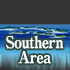
<style>
.page{position:relative;width:70px;height:70px;background:#333333}
.page>*{position:absolute;margin:0}
.t1{font:16px/15px "RyuminPro-ExBold";letter-spacing:-0.04em;color:#ffffff;scale:0.9 1}
</style>
<div class="page">
<p class="t1" style="left:6px;top:36px;width:58px;height:28px;text-align:center">Southern<br>Area</p>
</div>
